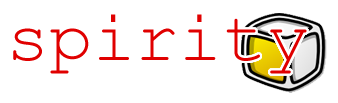
<style>
.page{position:relative;width:338px;height:103px;background:#ffffff}
.page>*{position:absolute;margin:0}
.t1{font:72px "CourierNewPSMT";color:#e00000}
</style>
<div class="page">
<p class="t1" style="left:13px;top:14px;width:294px;height:60px">spirity</p>
</div>
